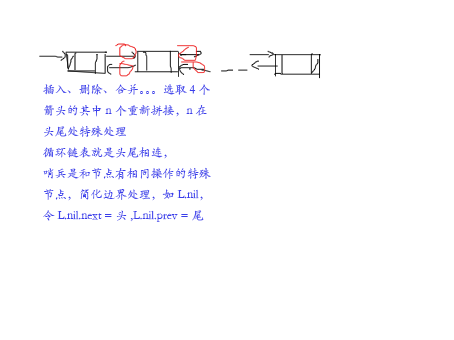
<style>
.page{position:relative;width:454px;height:340px;background:#ffffff}
.page>*{position:absolute;margin:0}
.t1{font:12px "STKaiti";color:#3a3fec}
</style>
<div class="page">
<p class="t1" style="left:43px;top:84px;width:168px;height:138px">插入、删除、合并。。。选取4个箭头的其中n个重新拼接，n在头尾处特殊处理<br>循环链表就是头尾相连，<br>哨兵是和节点有相同操作的特殊节点，简化边界处理，如L.nil，令L.nil.next = 头,L.nil.prev = 尾</p>
</div>
